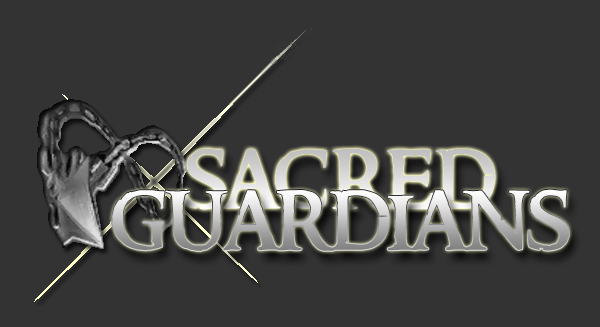
<style>
.page{position:relative;width:600px;height:327px;background:#333333}
.page>*{position:absolute;margin:0}
.t1{font:95.8px "RingbearerMedium"}
</style>
<div class="page">
<p class="t1" style="left:184px;top:148px;width:312px;height:62px">sacred</p>
<p class="t1" style="left:112px;top:189px;width:457px;height:62px">guardians</p>
</div>
